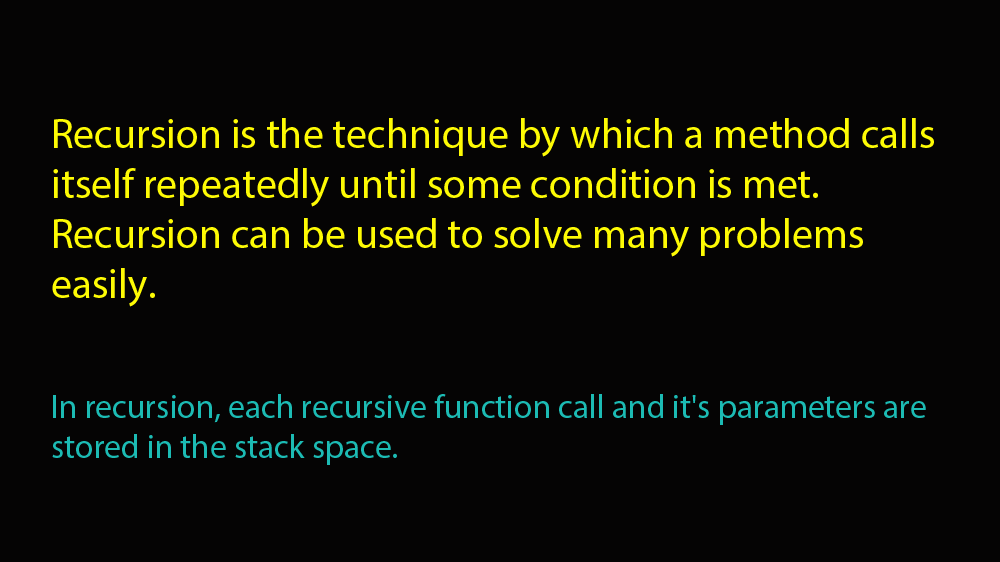
<style>
.page{position:relative;width:1000px;height:562px;background:#050404}
.page>*{position:absolute;margin:0}
.t1{font:41.7px "MyriadPro-Regular";color:#fefb04}
.t2{font:33.3px "MyriadPro-Regular";color:#1cbbb4}
</style>
<div class="page">
<p class="t1" style="left:52px;top:118px;width:882px;height:347px">Recursion is the technique by which a method calls itself repeatedly until some condition is met. Recursion can be used to solve many problems easily. <br><br><br><span class="t2">In recursion, each recursive function call and it's parameters are stored in the stack space.</span></p>
</div>
